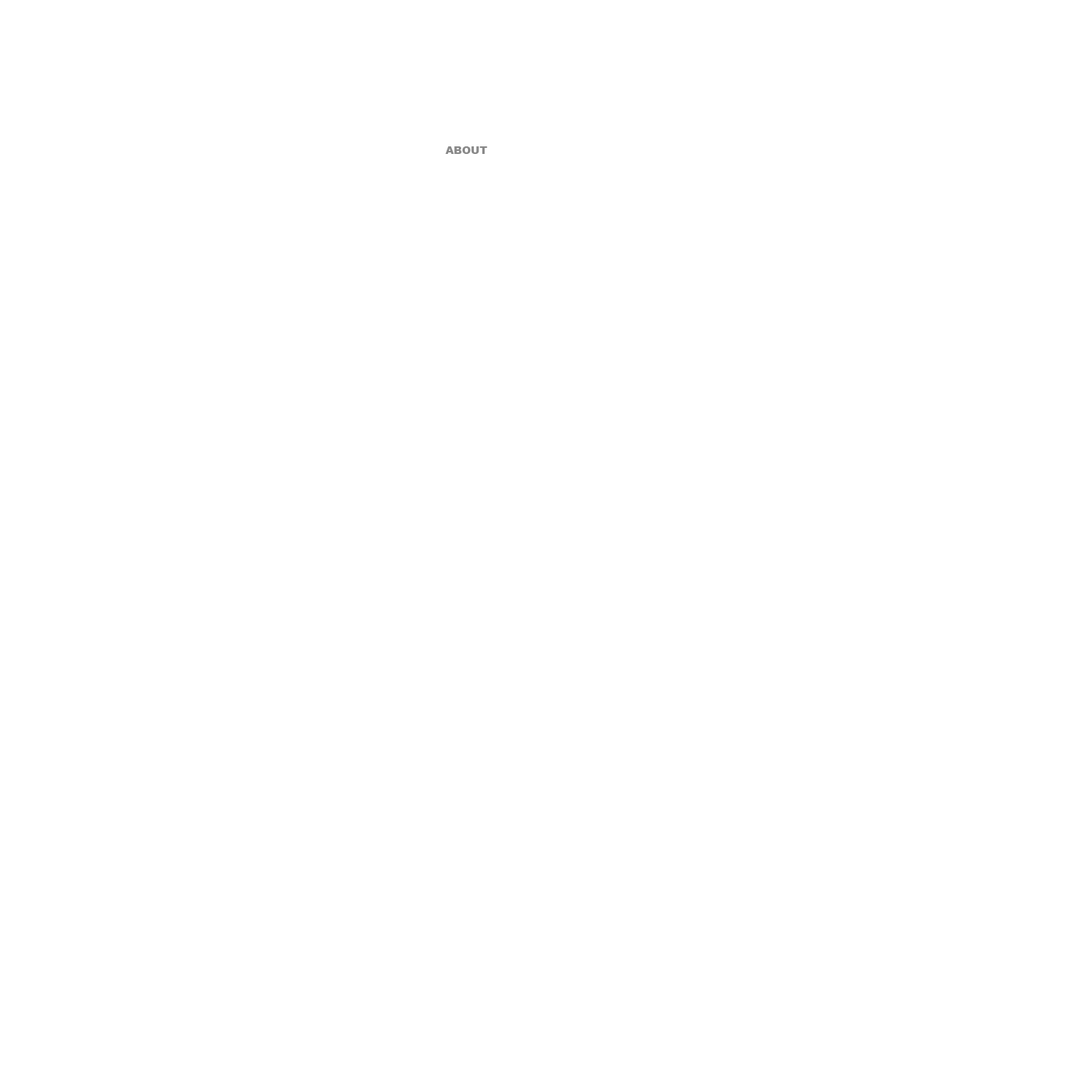
<style>
.page{position:relative;width:1092px;height:1092px;background:#ffffff}
.page>*{position:absolute;margin:0}
.t1{font:10.6px "Arial-Black";color:#898989}
</style>
<div class="page">
<p class="t1" style="left:445px;top:146px;width:43px;height:8px">ABOUT</p>
</div>
